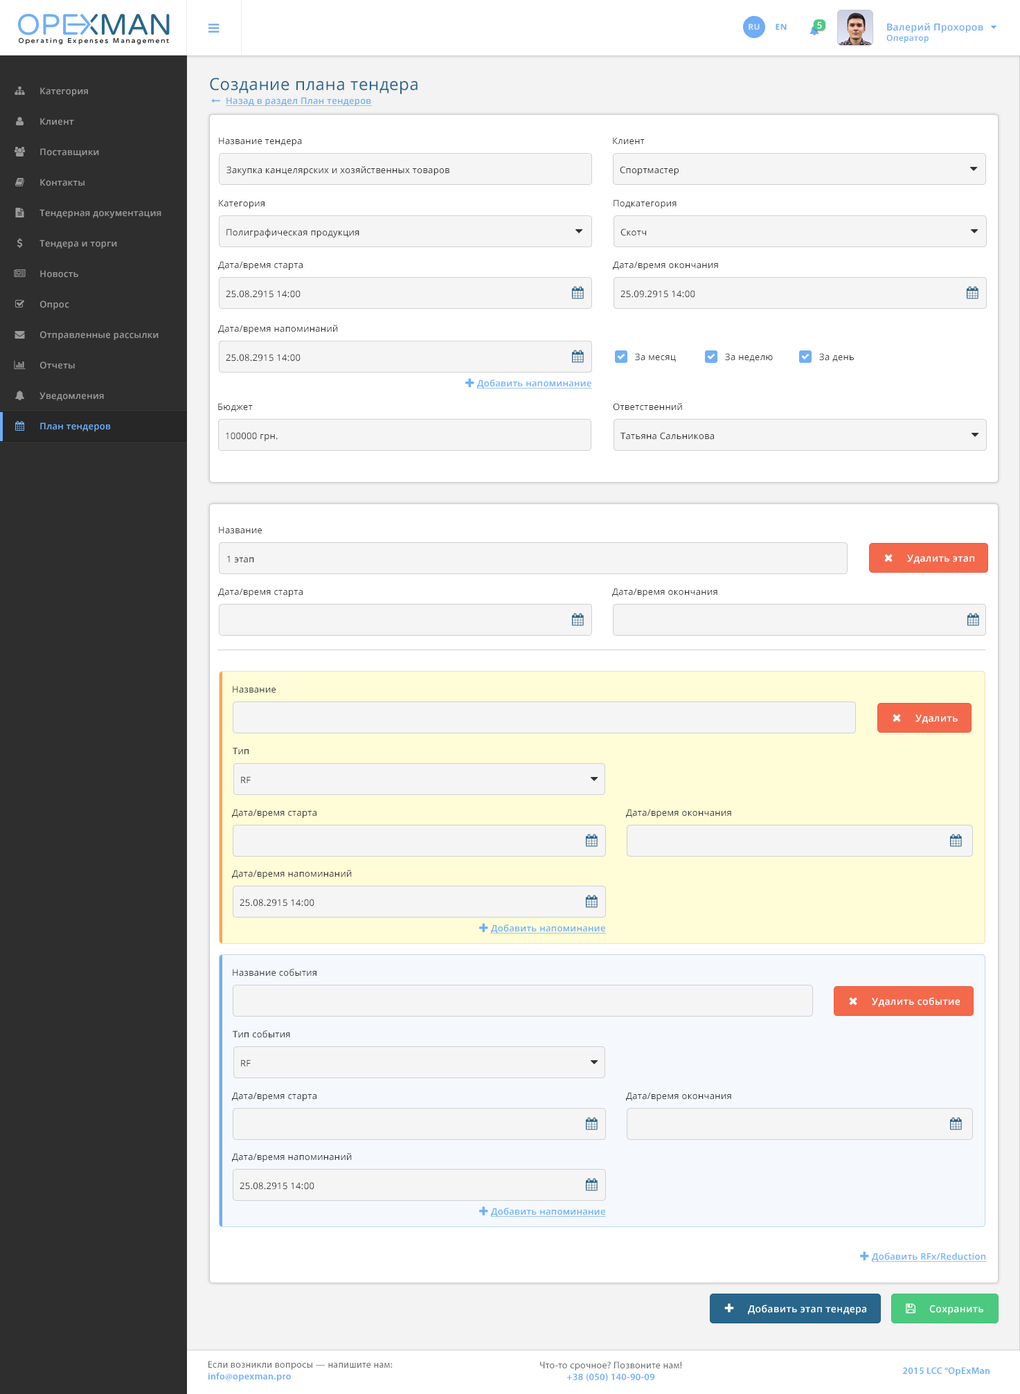
<style>
.page{position:relative;width:1020px;height:1394px;background:#ffffff}
.page>*{position:absolute;margin:0}
.t1{font:8.3px "OpenSans-Bold";letter-spacing:0.025em;color:#dbe8fc;text-transform:uppercase}
.t2{font:8.3px "OpenSans-Bold";letter-spacing:0.025em;color:#70adf5;text-transform:uppercase}
.t3{font:9px "OpenSans-Semibold";letter-spacing:0.025em;color:#ffffff}
.t4{font:9.7px "OpenSans-Semibold";letter-spacing:0.025em;color:#70adf5}
.t5{font:8.3px "OpenSans-Semibold";letter-spacing:0.025em;color:#70adf5}
.t6{font:16.6px "OpenSans";letter-spacing:0.025em;color:#29658b}
.t7{font:9px "OpenSans-Semibold";letter-spacing:0.025em;color:#999999}
.t8{font:9px "OpenSans-Semibold";letter-spacing:0.025em;color:#6faff8;text-decoration:underline}
.t9{font:9px "OpenSans";letter-spacing:0.025em;color:#333333}
.t10{font:9px "OpenSans-Semibold";letter-spacing:0.025em;color:#70adf5}
.t11{font:9.7px "OpenSans-Semibold";letter-spacing:0.025em;color:#ffffff}
.t12{font:9.7px "MyriadPro-Regular";letter-spacing:0.025em;color:#696969}
.t13{font:9.7px "MyriadPro-Semibold";letter-spacing:0.025em;color:#6eaef8}
</style>
<div class="page">
<p class="t1" style="left:748px;top:24px;width:11px;height:6px">Ru</p>
<p class="t2" style="left:775px;top:24px;width:11px;height:6px">EN</p>
<p class="t3" style="left:817px;top:21px;width:5px;height:8px">5</p>
<p class="t4" style="left:886px;top:23px;width:97px;height:20px">Валерий Прохоров<br><span class="t5">Оператор</span></p>
<p class="t6" style="left:210px;top:78px;width:207px;height:16px">Создание плана тендера</p>
<p class="t7" style="left:40px;top:87px;width:48px;height:9px">Категория</p>
<p class="t8" style="left:226px;top:97px;width:146px;height:9px">Назад в раздел План тендеров</p>
<p class="t7" style="left:40px;top:118px;width:34px;height:7px">Клиент</p>
<p class="t9" style="left:219px;top:137px;width:83px;height:9px">Название тендера</p>
<p class="t9" style="left:613px;top:137px;width:32px;height:8px">Клиент</p>
<p class="t7" style="left:40px;top:148px;width:59px;height:9px">Поставщики</p>
<p class="t9" style="left:226px;top:166px;width:223px;height:9px">Закупка канцелярских и хозяйственных товаров</p>
<p class="t9" style="left:620px;top:166px;width:58px;height:9px">Спортмастер</p>
<p class="t7" style="left:40px;top:179px;width:44px;height:7px">Контакты</p>
<p class="t7" style="left:39px;top:209px;width:122px;height:9px">Тендерная документация</p>
<p class="t9" style="left:219px;top:199px;width:45px;height:9px">Категория</p>
<p class="t9" style="left:613px;top:199px;width:63px;height:9px">Подкатегория</p>
<p class="t9" style="left:226px;top:228px;width:133px;height:9px">Полиграфическая продукция</p>
<p class="t9" style="left:620px;top:228px;width:26px;height:8px">Скотч</p>
<p class="t7" style="left:39px;top:240px;width:78px;height:9px">Тендера и торги</p>
<p class="t7" style="left:40px;top:270px;width:38px;height:8px">Новость</p>
<p class="t9" style="left:218px;top:261px;width:85px;height:9px">Дата/время старта</p>
<p class="t9" style="left:613px;top:261px;width:105px;height:9px">Дата/время окончания</p>
<p class="t9" style="left:226px;top:290px;width:74px;height:8px">25.08.2915 14:00</p>
<p class="t9" style="left:620px;top:290px;width:75px;height:8px">25.09.2915 14:00</p>
<p class="t7" style="left:40px;top:300px;width:29px;height:9px">Опрос</p>
<p class="t9" style="left:218px;top:325px;width:120px;height:9px">Дата/время напоминаний</p>
<p class="t7" style="left:40px;top:331px;width:119px;height:9px">Отправленные рассылки</p>
<p class="t9" style="left:226px;top:354px;width:74px;height:7px">25.08.2915 14:00</p>
<p class="t9" style="left:226px;top:354px;width:74px;height:7px">25.08.2915 14:00</p>
<p class="t9" style="left:635px;top:353px;width:41px;height:9px">За месяц</p>
<p class="t9" style="left:725px;top:353px;width:48px;height:9px">За неделю</p>
<p class="t9" style="left:819px;top:353px;width:35px;height:9px">За день</p>
<p class="t7" style="left:40px;top:361px;width:35px;height:8px">Отчеты</p>
<p class="t8" style="left:477px;top:379px;width:115px;height:9px">Добавить напоминание</p>
<p class="t7" style="left:39px;top:392px;width:65px;height:9px">Уведомления</p>
<p class="t9" style="left:218px;top:403px;width:35px;height:9px">Бюджет</p>
<p class="t9" style="left:613px;top:403px;width:69px;height:8px">Ответственний</p>
<p class="t10" style="left:40px;top:422px;width:71px;height:9px">План тендеров</p>
<p class="t9" style="left:226px;top:432px;width:52px;height:9px">100000 грн.</p>
<p class="t9" style="left:620px;top:432px;width:94px;height:8px">Татьяна Сальникова</p>
<p class="t9" style="left:219px;top:526px;width:43px;height:8px">Название</p>
<p class="t9" style="left:227px;top:555px;width:27px;height:8px">1 этап</p>
<p class="t11" style="left:907px;top:555px;width:67px;height:9px">Удалить этап</p>
<p class="t9" style="left:218px;top:588px;width:85px;height:9px">Дата/время старта</p>
<p class="t9" style="left:612px;top:588px;width:105px;height:9px">Дата/время окончания</p>
<p class="t9" style="left:233px;top:685px;width:43px;height:8px">Название</p>
<p class="t11" style="left:915px;top:714px;width:42px;height:9px">Удалить</p>
<p class="t9" style="left:233px;top:747px;width:16px;height:7px">Тип</p>
<p class="t9" style="left:241px;top:776px;width:10px;height:7px">RF</p>
<p class="t9" style="left:232px;top:809px;width:84px;height:9px">Дата/время старта</p>
<p class="t9" style="left:626px;top:809px;width:105px;height:9px">Дата/время окончания</p>
<p class="t9" style="left:232px;top:870px;width:120px;height:9px">Дата/время напоминаний</p>
<p class="t9" style="left:240px;top:899px;width:74px;height:7px">25.08.2915 14:00</p>
<p class="t9" style="left:240px;top:899px;width:74px;height:7px">25.08.2915 14:00</p>
<p class="t8" style="left:491px;top:924px;width:115px;height:9px">Добавить напоминание</p>
<p class="t9" style="left:233px;top:969px;width:83px;height:7px">Название события</p>
<p class="t11" style="left:872px;top:997px;width:88px;height:10px">Удалить cобытие</p>
<p class="t9" style="left:233px;top:1030px;width:57px;height:8px">Тип события</p>
<p class="t9" style="left:241px;top:1059px;width:10px;height:7px">RF</p>
<p class="t9" style="left:232px;top:1092px;width:84px;height:9px">Дата/время старта</p>
<p class="t9" style="left:626px;top:1092px;width:105px;height:9px">Дата/время окончания</p>
<p class="t9" style="left:232px;top:1153px;width:120px;height:9px">Дата/время напоминаний</p>
<p class="t9" style="left:240px;top:1182px;width:74px;height:7px">25.08.2915 14:00</p>
<p class="t9" style="left:240px;top:1182px;width:74px;height:7px">25.08.2915 14:00</p>
<p class="t8" style="left:491px;top:1207px;width:115px;height:9px">Добавить напоминание</p>
<p class="t8" style="left:872px;top:1252px;width:115px;height:9px">Добавить RFx/Reduction</p>
<p class="t11" style="left:748px;top:1304px;width:118px;height:11px">Добавить этап тендера</p>
<p class="t11" style="left:929px;top:1304px;width:54px;height:11px">Сохранить</p>
<p class="t12" style="left:208px;top:1360px;width:185px;height:21px">Если возникли вопросы — напишите нам:<br><span class="t13">info@opexman.pro</span></p>
<p class="t12" style="left:540px;top:1361px;width:142px;height:20px;text-align:center">Что-то срочное? Позвоните нам!<br><span class="t13">+38 (050) 140-90-09</span></p>
<p class="t13" style="left:903px;top:1367px;width:86px;height:9px">2015 LCC “OpExMan</p>
</div>
